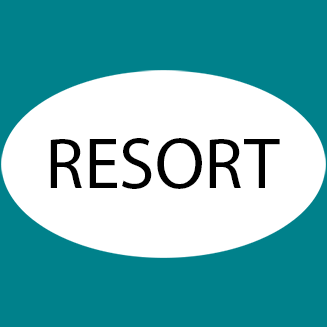
<style>
.page{position:relative;width:327px;height:327px;background:#00818b}
.page>*{position:absolute;margin:0}
.t1{font:72px "MyriadPro-Regular";color:#000000}
</style>
<div class="page">
<p class="t1" style="left:50px;top:138px;width:230px;height:51px">RESORT</p>
</div>
